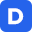
<style>
.page{position:relative;width:32px;height:32px;background:#2563eb}
.page>*{position:absolute;margin:0}
.t1{font:22px "Outfit-Bold";color:#ffffff}
</style>
<div class="page">
<p class="t1" style="left:8px;top:8px;width:16px;height:17px">D</p>
</div>
